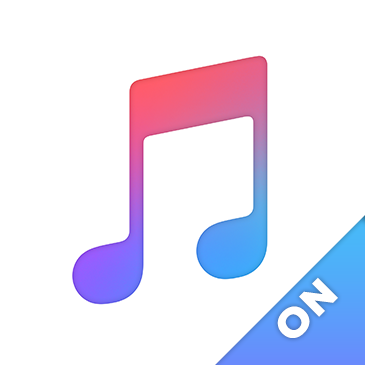
<style>
.page{position:relative;width:365px;height:365px;background:#ffffff}
.page>*{position:absolute;margin:0}
.t1{font:39px "NexaBlack";letter-spacing:0.06em;color:#ffffff}
</style>
<div class="page">
<p class="t1" style="left:277px;top:277px;width:61px;height:61px;rotate:-45deg">ON</p>
</div>
